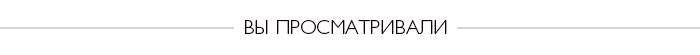
<style>
.page{position:relative;width:700px;height:55px;background:#ffffff}
.page>*{position:absolute;margin:0}
.t1{font:20px "GalsLight";color:#130202;text-transform:uppercase}
</style>
<div class="page">
<p class="t1" style="left:245px;top:20px;width:202px;height:14px">вы просматривали</p>
</div>
